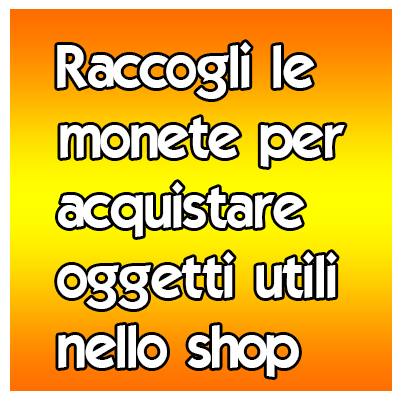
<style>
.page{position:relative;width:400px;height:400px;background:#ffffff}
.page>*{position:absolute;margin:0}
.t1{font:58.3px "ELEGANCE";color:#ffffff}
</style>
<div class="page">
<p class="t1" style="left:57px;top:42px;width:288px;height:335px">Raccogli le<br>monete per<br>acquistare<br>oggetti utili<br>nello shop</p>
</div>
